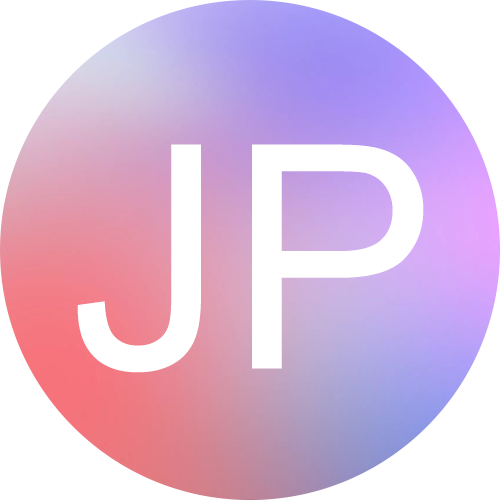
<style>
.page{position:relative;width:500px;height:500px;background:#ffffff}
.page>*{position:absolute;margin:0}
.t1{font:312.5px "ArialMT";letter-spacing:0.01em;color:#ffffff}
</style>
<div class="page">
<p class="t1" style="left:77px;top:144px;width:347px;height:229px">JP</p>
</div>
